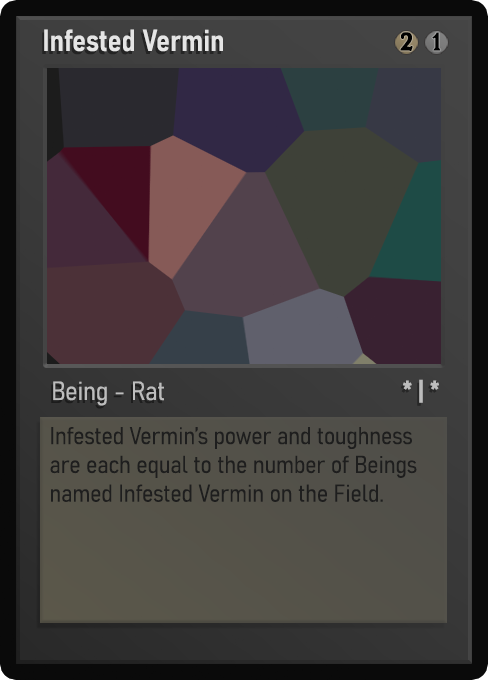
<style>
.page{position:relative;width:488px;height:680px}
.page>*{position:absolute;margin:0}
.t1{font:30px "Bahnschrift-SemiBoldSemiCondensed";color:#f2f2f2;font-weight:bold}
.t2{font:25px "WTRRoycroft";color:#000000;font-weight:bold;scale:1.09 1}
.t3{font:26px "Bahnschrift-LightSemiCondensed";color:#c8c8c8;font-weight:bold}
.t4{font:26px "Bahnschrift-BoldSemiCondensed";color:#bdbdbd;font-weight:bold}
.t5{font:24px "Bahnschrift-LightSemiCondensed";color:#1e1e1e;font-weight:bold}
</style>
<div class="page">
<p class="t1" style="left:44px;top:29px;width:179px;height:23px;opacity:0.9">Infested Vermin</p>
<p class="t2" style="left:400px;top:32px;width:13px;height:19px">2</p>
<p class="t2" style="left:432px;top:32px;width:9px;height:19px">1</p>
<p class="t3" style="left:53px;top:381px;width:111px;height:25px;opacity:0.9">Being - Rat</p>
<p class="t4" style="left:403px;top:379px;width:36px;height:24px">* | *</p>
<p class="t5" style="left:50px;top:427px;width:367px;height:75px">Infested Vermin’s power and toughness are each equal to the number of Beings named Infested Vermin on the Field.</p>
</div>
